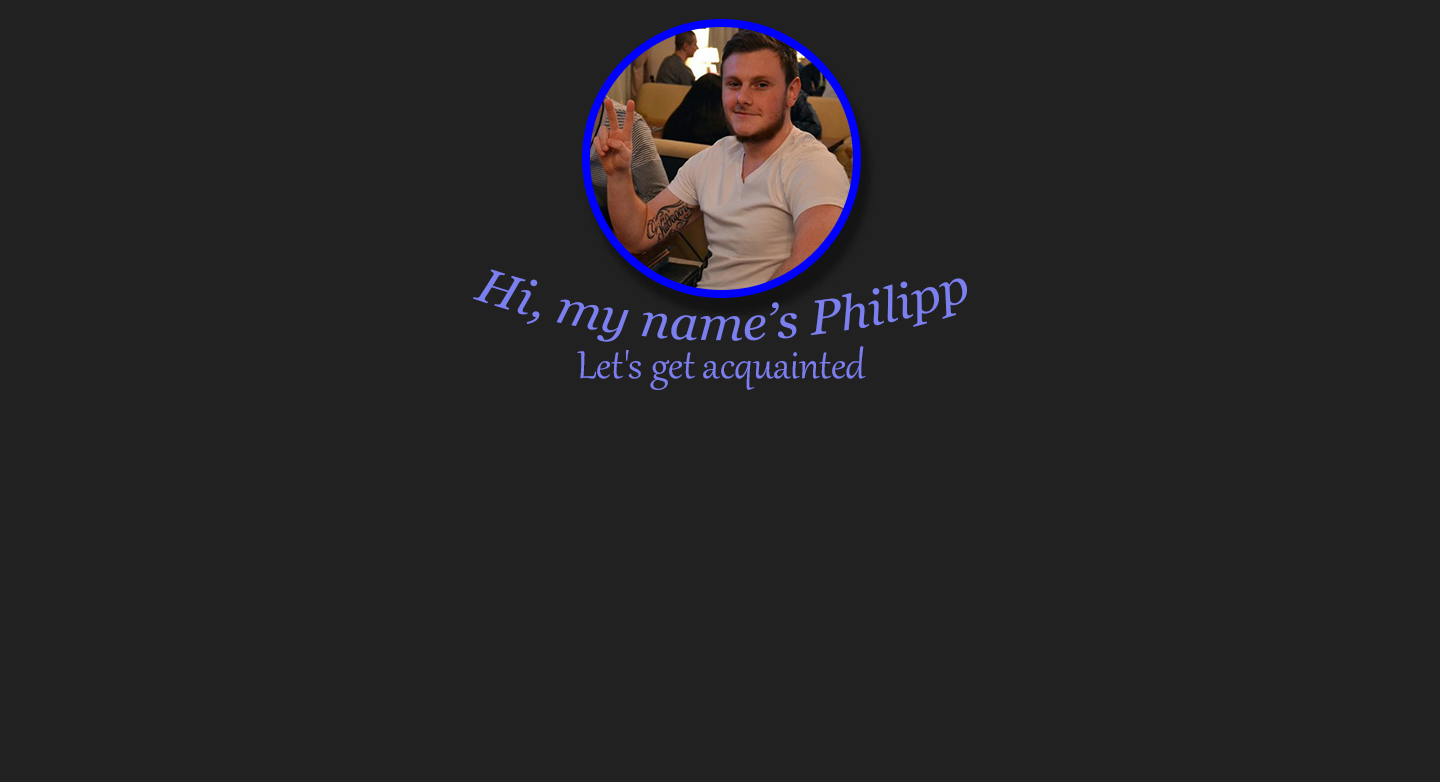
<style>
.page{position:relative;width:1440px;height:782px;background:#212121}
.page>*{position:absolute;margin:0}
.t1{font:47.8px "Georgia-Italic";color:#7c7fee}
.t2{font:47.8px "Gabriola";color:#7c7fee}
</style>
<div class="page">
<p class="t1" style="left:473px;top:269px;width:494px;height:73px">Hi, my name’s Philipp</p>
<p class="t2" style="left:577px;top:346px;width:289px;height:44px">Let's get acquainted</p>
</div>
